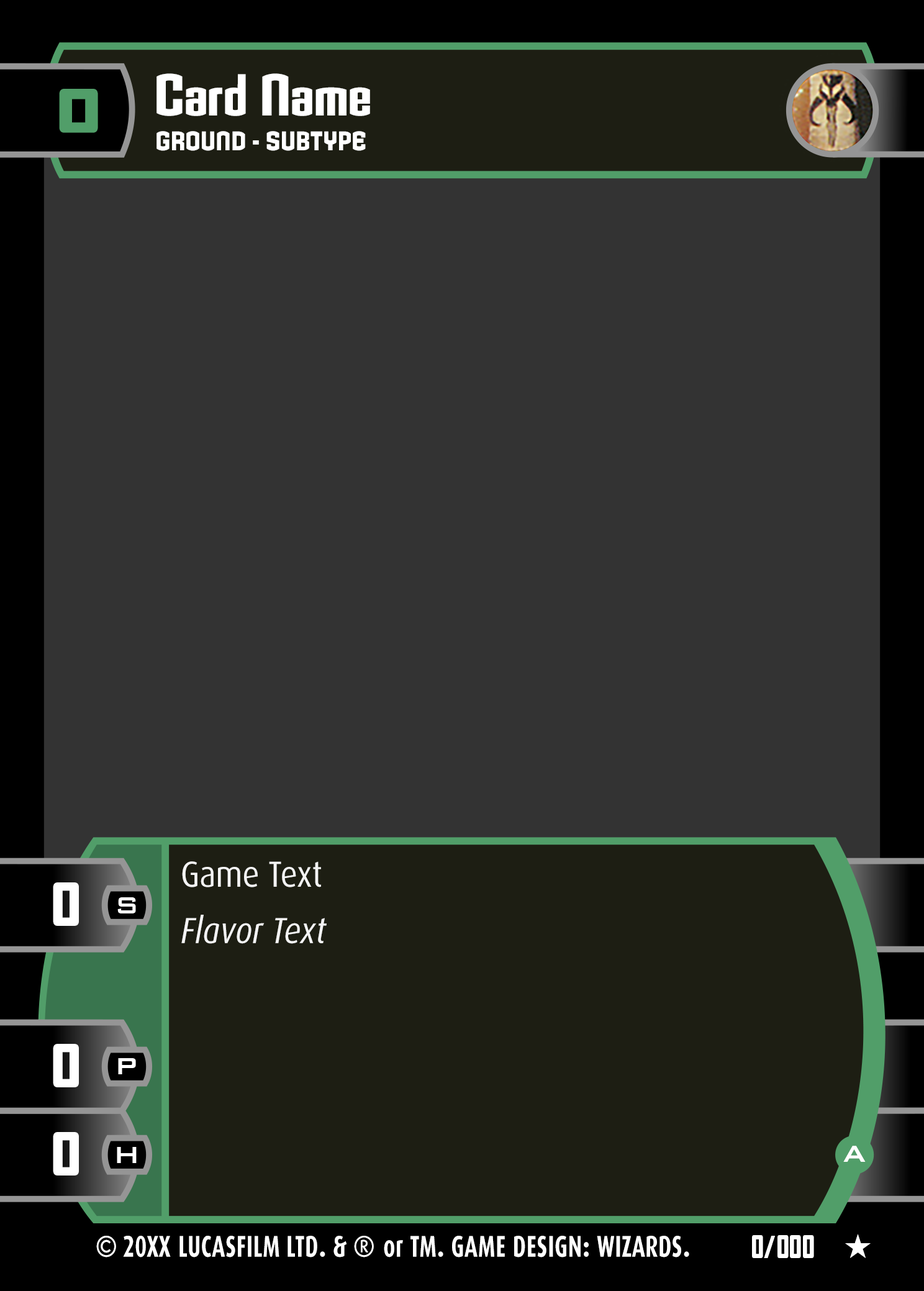
<style>
.page{position:relative;width:924px;height:1291px;background:#333333}
.page>*{position:absolute;margin:0}
.t1{font:57.5px "Armada-BoldCondensed";letter-spacing:0.005em;color:#ffffff}
.t2{font:57.1px "AgencyFB-BlackWide";letter-spacing:0.016em;color:#519e69;text-transform:uppercase}
.t3{font:26px "Armada-Bold";letter-spacing:0.02em;color:#ffffff;text-transform:uppercase;scale:0.69 1}
.t4{font:36.2px "Dax-Regular";color:#f4f4f4;scale:0.89 1}
.t5{font:56.9px "AgencyFBBlack";color:#ffffff;text-transform:uppercase}
.t6{font:36.2px "Dax-Italic";color:#f4f4f4;scale:0.89 1}
.t7{font:30.7px "BankGothicBT-Medium";color:#ffffff;text-transform:uppercase}
.t8{font:30.1px "Dax-Bold";letter-spacing:0.02em;color:#ffffff;scale:0.71 1}
.t9{font:30.1px "Dax-Bold";color:#ffffff;scale:0.9 1}
.t10{font:30.1px "Dax-Bold";color:#ffffff;scale:0.71 1}
.t11{font:30.1px "Dax-Bold";letter-spacing:0.02em;color:#ffffff;scale:0.9 1}
.t12{font:30.1px "Dax-Bold";letter-spacing:0.032em;color:#ffffff;scale:0.71 1}
.t13{font:29.5px "AgencyFBBlack";color:#ffffff;scale:0.82 1}
</style>
<div class="page">
<p class="t1" style="left:156px;top:73px;width:214px;height:43px">Card Name</p>
<p class="t2" style="left:59px;top:89px;width:39px;height:44px">0</p>
<p class="t3" style="left:156px;top:131px;width:210px;height:20px">Ground - Subtype</p>
<p class="t4" style="left:182px;top:861px;width:139px;height:26px">Game Text</p>
<p class="t5" style="left:53px;top:882px;width:26px;height:44px">0</p>
<p class="t6" style="left:181px;top:915px;width:146px;height:29px">Flavor Text</p>
<p class="t5" style="left:53px;top:1044px;width:26px;height:43px">0</p>
<p class="t5" style="left:53px;top:1132px;width:26px;height:43px">0</p>
<p class="t7" style="left:843px;top:1145px;width:22px;height:17px">a</p>
<p class="t8" style="left:96px;top:1235px;width:593px;height:22px"><span class="t9">©</span><span class="t10"> 20XX </span>LUCASFILM LTD<span class="t11">.</span> &amp; <span class="t11">® </span>or TM<span class="t11">.</span> G<span class="t12">AME DES</span>IGN<span class="t11">:</span> WIZARDS<span class="t11">.</span></p>
<p class="t13" style="left:752px;top:1235px;width:62px;height:23px">0/000</p>
</div>
